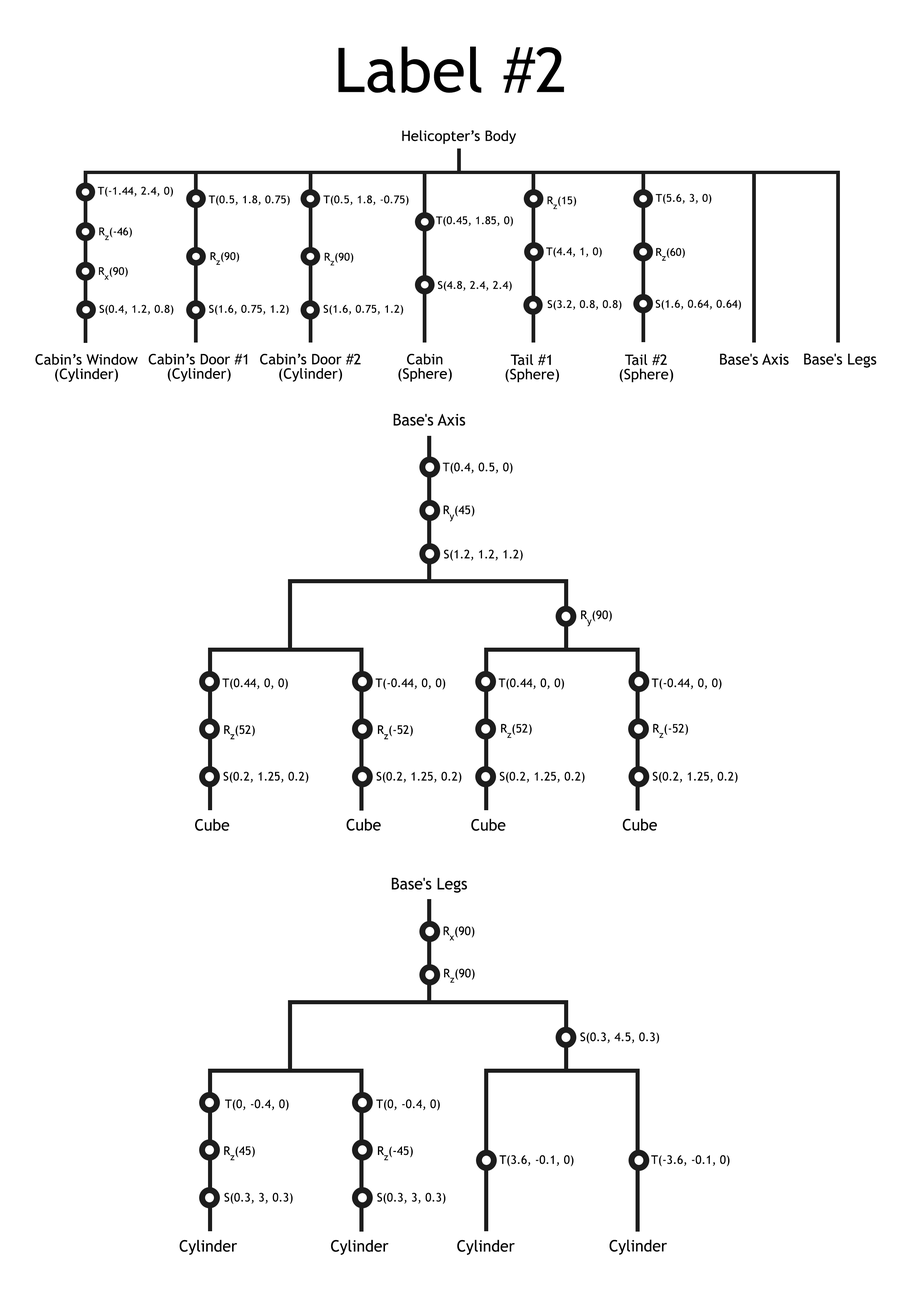
<style>
.page{position:relative;width:918px;height:1299px;background:#ffffff}
.page>*{position:absolute;margin:0}
.t1{font:61.7px "TrebuchetMS";color:#000000}
.t2{font:14.4px "TrebuchetMS";color:#000000}
.t3{font:10.8px "TrebuchetMS";color:#000000}
.t4{font:14.4px/14.4px "TrebuchetMS";color:#000000}
.t5{font:15.1px "TrebuchetMS";color:#000000}
.t6{font:16.1px "TrebuchetMS";color:#000000}
.t7{font:11.9px "TrebuchetMS";color:#000000}
.t8{font:15.9px "TrebuchetMS";color:#000000}
</style>
<div class="page">
<p class="t1" style="left:338px;top:46px;width:226px;height:47px">Label #2</p>
<p class="t2" style="left:402px;top:130px;width:114px;height:14px">Helicopter’s Body</p>
<p class="t3" style="left:98px;top:187px;width:75px;height:10px">T(-1.44, 2.4, 0)</p>
<p class="t3" style="left:209px;top:195px;width:81px;height:10px">T(0.5, 1.8, 0.75)</p>
<p class="t3" style="left:324px;top:195px;width:85px;height:10px">T(0.5, 1.8, -0.75)</p>
<p class="t3" style="left:548px;top:196px;width:28px;height:13px">R<span class="t2">z</span>(15)</p>
<p class="t3" style="left:656px;top:194px;width:56px;height:10px">T(5.6, 3, 0)</p>
<p class="t3" style="left:436px;top:216px;width:77px;height:11px">T(0.45, 1.85, 0)</p>
<p class="t3" style="left:99px;top:227px;width:33px;height:13px">R<span class="t2">z</span>(-46)</p>
<p class="t3" style="left:210px;top:252px;width:29px;height:13px">R<span class="t2">z</span>(90)</p>
<p class="t3" style="left:325px;top:252px;width:29px;height:13px">R<span class="t2">z</span>(90)</p>
<p class="t3" style="left:546px;top:247px;width:56px;height:11px">T(4.4, 1, 0)</p>
<p class="t3" style="left:656px;top:248px;width:29px;height:13px">R<span class="t2">z</span>(60)</p>
<p class="t3" style="left:99px;top:267px;width:29px;height:13px">R<span class="t2">x</span>(90)</p>
<p class="t3" style="left:438px;top:281px;width:74px;height:10px">S(4.8, 2.4, 2.4)</p>
<p class="t3" style="left:100px;top:305px;width:74px;height:10px">S(0.4, 1.2, 0.8)</p>
<p class="t3" style="left:209px;top:305px;width:80px;height:10px">S(1.6, 0.75, 1.2)</p>
<p class="t3" style="left:324px;top:305px;width:79px;height:10px">S(1.6, 0.75, 1.2)</p>
<p class="t3" style="left:548px;top:300px;width:74px;height:10px">S(3.2, 0.8, 0.8)</p>
<p class="t3" style="left:656px;top:300px;width:85px;height:10px">S(1.6, 0.64, 0.64)</p>
<p class="t4" style="left:35px;top:354px;width:103px;height:28px;text-align:center">Cabin’s Window<br>(Cylinder)</p>
<p class="t4" style="left:148px;top:354px;width:99px;height:28px;text-align:center">Cabin’s Door #1<br>(Cylinder)</p>
<p class="t4" style="left:260px;top:354px;width:101px;height:28px;text-align:center">Cabin’s Door #2<br>(Cylinder)</p>
<p class="t4" style="left:398px;top:354px;width:54px;height:28px;text-align:center">Cabin<br>(Sphere)</p>
<p class="t4" style="left:506px;top:354px;width:53px;height:28px;text-align:center">Tail #1<br>(Sphere)</p>
<p class="t4" style="left:620px;top:354px;width:53px;height:28px;text-align:center">Tail #2<br>(Sphere)</p>
<p class="t5" style="left:720px;top:354px;width:69px;height:11px">Base's Axis</p>
<p class="t5" style="left:804px;top:353px;width:73px;height:15px">Base's Legs</p>
<p class="t6" style="left:394px;top:414px;width:71px;height:12px">Base's Axis</p>
<p class="t7" style="left:443px;top:462px;width:70px;height:12px">T(0.4, 0.5, 0)</p>
<p class="t7" style="left:444px;top:505px;width:31px;height:16px">R<span class="t8">y</span>(45)</p>
<p class="t7" style="left:444px;top:549px;width:79px;height:12px">S(1.2, 1.2, 1.2)</p>
<p class="t7" style="left:581px;top:610px;width:31px;height:16px">R<span class="t8">y</span>(90)</p>
<p class="t7" style="left:223px;top:678px;width:65px;height:12px">T(0.44, 0, 0)</p>
<p class="t7" style="left:375px;top:678px;width:70px;height:12px">T(-0.44, 0, 0)</p>
<p class="t7" style="left:499px;top:678px;width:65px;height:12px">T(0.44, 0, 0)</p>
<p class="t7" style="left:652px;top:678px;width:70px;height:12px">T(-0.44, 0, 0)</p>
<p class="t7" style="left:224px;top:725px;width:31px;height:14px">R<span class="t8">z</span>(52)</p>
<p class="t7" style="left:378px;top:725px;width:35px;height:14px">R<span class="t8">z</span>(-52)</p>
<p class="t7" style="left:501px;top:723px;width:31px;height:15px">R<span class="t8">z</span>(52)</p>
<p class="t7" style="left:653px;top:723px;width:35px;height:15px">R<span class="t8">z</span>(-52)</p>
<p class="t7" style="left:224px;top:772px;width:84px;height:11px">S(0.2, 1.25, 0.2)</p>
<p class="t7" style="left:377px;top:772px;width:85px;height:11px">S(0.2, 1.25, 0.2)</p>
<p class="t7" style="left:500px;top:772px;width:85px;height:11px">S(0.2, 1.25, 0.2)</p>
<p class="t7" style="left:653px;top:772px;width:85px;height:11px">S(0.2, 1.25, 0.2)</p>
<p class="t8" style="left:195px;top:819px;width:35px;height:12px">Cube</p>
<p class="t8" style="left:347px;top:818px;width:34px;height:13px">Cube</p>
<p class="t8" style="left:471px;top:819px;width:35px;height:12px">Cube</p>
<p class="t8" style="left:623px;top:818px;width:34px;height:13px">Cube</p>
<p class="t6" style="left:392px;top:877px;width:75px;height:16px">Base's Legs</p>
<p class="t7" style="left:444px;top:926px;width:31px;height:14px">R<span class="t8">x</span>(90)</p>
<p class="t7" style="left:444px;top:968px;width:31px;height:15px">R<span class="t8">z</span>(90)</p>
<p class="t7" style="left:581px;top:1032px;width:78px;height:12px">S(0.3, 4.5, 0.3)</p>
<p class="t7" style="left:225px;top:1099px;width:64px;height:12px">T(0, -0.4, 0)</p>
<p class="t7" style="left:376px;top:1099px;width:64px;height:12px">T(0, -0.4, 0)</p>
<p class="t7" style="left:224px;top:1146px;width:31px;height:14px">R<span class="t8">z</span>(45)</p>
<p class="t7" style="left:378px;top:1146px;width:35px;height:14px">R<span class="t8">z</span>(-45)</p>
<p class="t7" style="left:499px;top:1155px;width:75px;height:11px">T(3.6, -0.1, 0)</p>
<p class="t7" style="left:651px;top:1155px;width:79px;height:11px">T(-3.6, -0.1, 0)</p>
<p class="t7" style="left:224px;top:1192px;width:69px;height:12px">S(0.3, 3, 0.3)</p>
<p class="t7" style="left:377px;top:1192px;width:69px;height:12px">S(0.3, 3, 0.3)</p>
<p class="t8" style="left:180px;top:1240px;width:57px;height:15px">Cylinder</p>
<p class="t8" style="left:331px;top:1240px;width:58px;height:15px">Cylinder</p>
<p class="t8" style="left:457px;top:1240px;width:58px;height:15px">Cylinder</p>
<p class="t8" style="left:609px;top:1239px;width:58px;height:16px">Cylinder</p>
</div>
